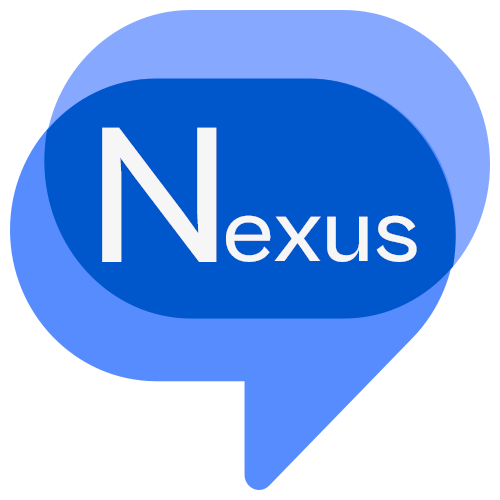
<style>
.page{position:relative;width:500px;height:500px;background:#ffffff}
.page>*{position:absolute;margin:0}
.t1{font:200px "CabinetGrotesk-Medium";letter-spacing:0.02em;color:#f6f6f6;scale:1.08 1}
.t2{font:91.7px "CabinetGrotesk-Medium";letter-spacing:0.02em;color:#f6f6f6;scale:1.08 1}
</style>
<div class="page">
<p class="t1" style="left:102px;top:127px;width:115px;height:135px">N</p>
<p class="t2" style="left:226px;top:215px;width:191px;height:47px">exus</p>
</div>
